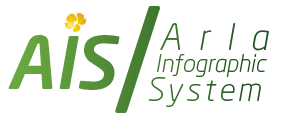
<style>
.page{position:relative;width:285px;height:126px;background:#ffffff}
.page>*{position:absolute;margin:0}
.t1{font:144px "NeoSans";color:#467e32}
.t2{font:36.1px "NeoSans-LightItalic";letter-spacing:0.475em;color:#306329}
.t3{font:72px "NeoSans-MediumItalic";color:#5d9a3c}
.t4{font:24px "NeoSans-LightItalic";color:#2f6228}
.t5{font:32.1px "NeoSans-LightItalic";letter-spacing:0.1em;color:#2e6128}
</style>
<div class="page">
<p class="t1" style="left:115px;top:5px;width:45px;height:108px">/</p>
<p class="t2" style="left:160px;top:23px;width:109px;height:28px">Arla</p>
<p class="t3" style="left:8px;top:35px;width:112px;height:55px">AIS</p>
<p class="t4" style="left:157px;top:54px;width:110px;height:23px">Infographic</p>
<p class="t5" style="left:148px;top:77px;width:113px;height:30px">System</p>
</div>
